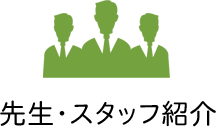
<style>
.page{position:relative;width:216px;height:127px;background:#ffffff}
.page>*{position:absolute;margin:0}
.t1{font:28px "TBChibiRGoPlusKPro-Regular";color:#000000}
</style>
<div class="page">
<p class="t1" style="left:0px;top:100px;width:216px;height:27px">先生・スタッフ紹介</p>
</div>
